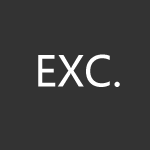
<style>
.page{position:relative;width:150px;height:150px;background:#333333}
.page>*{position:absolute;margin:0}
.t1{font:41.7px "MicrosoftYaHei";color:#ffffff}
</style>
<div class="page">
<p class="t1" style="left:38px;top:54px;width:82px;height:33px">EXC.</p>
</div>
